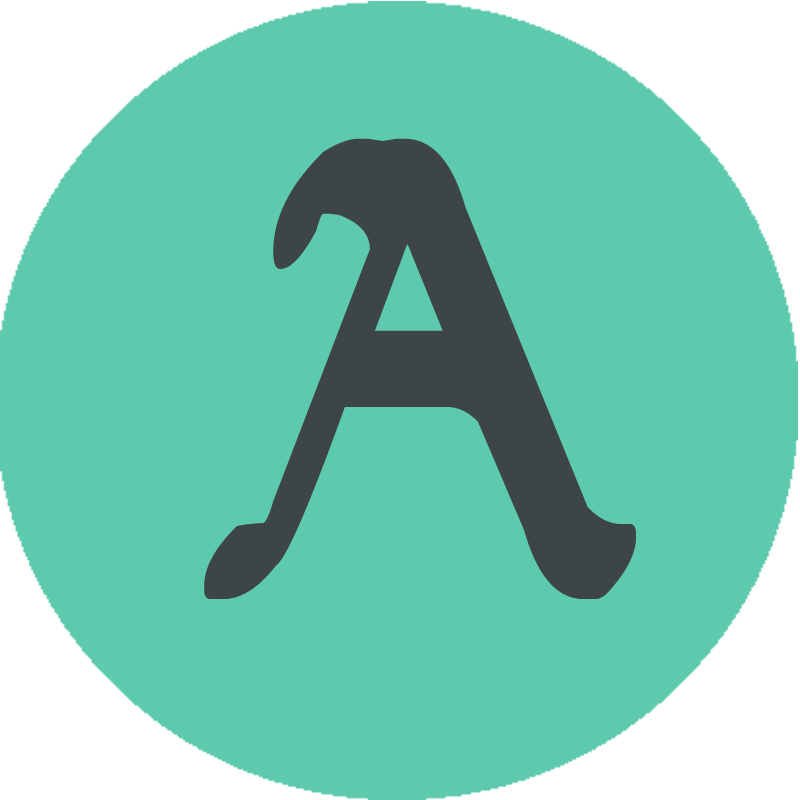
<style>
.page{position:relative;width:800px;height:800px;background:#5dcaad}
.page>*{position:absolute;margin:0}
.t1{font:589.1px "ARABIANKNIGHT";color:#3d4548}
</style>
<div class="page">
<p class="t1" style="left:204px;top:138px;width:432px;height:461px">A</p>
</div>
